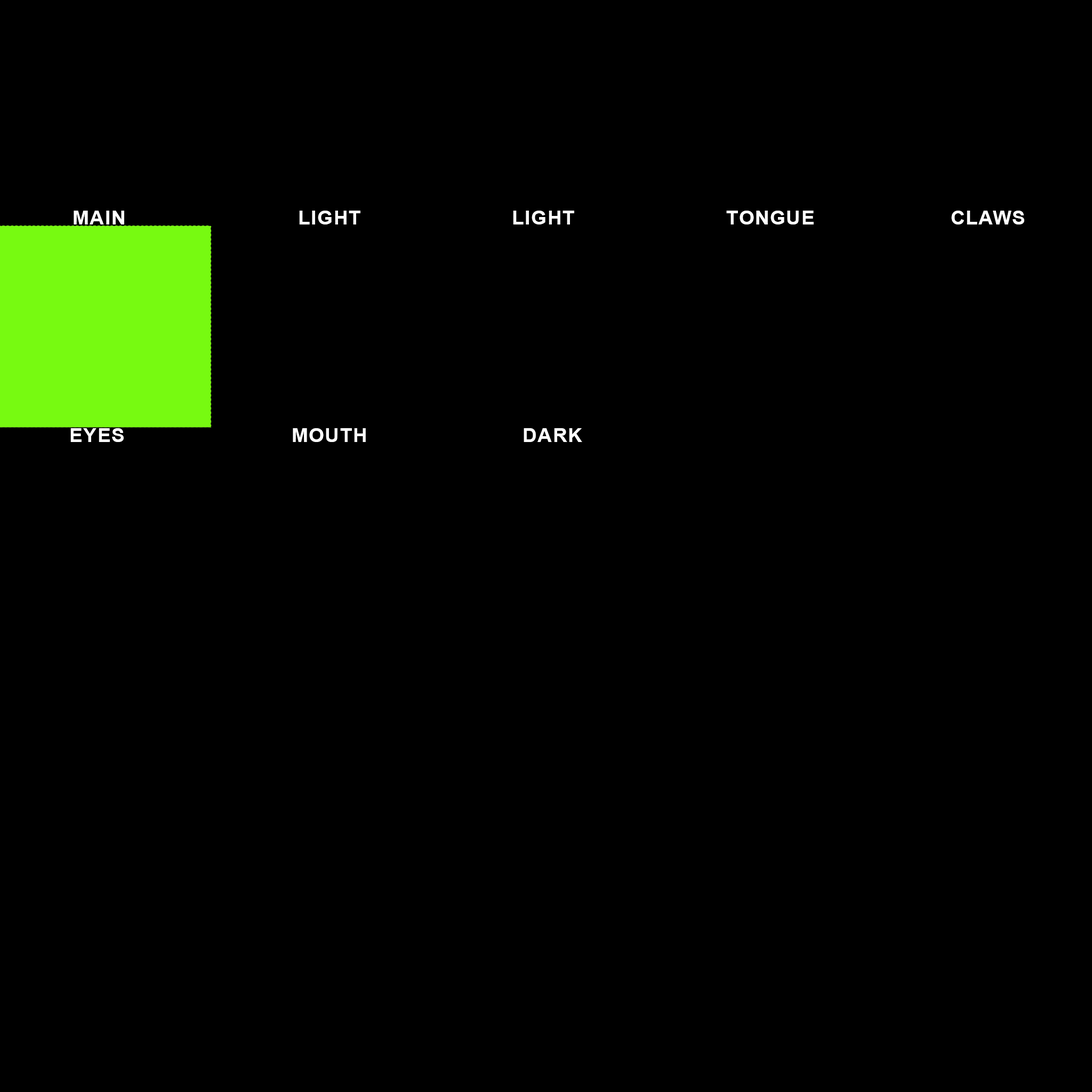
<style>
.page{position:relative;width:1092px;height:1092px;background:#000000}
.page>*{position:absolute;margin:0}
.t1{font:19.4px "Arial-BoldMT";letter-spacing:0.05em;color:#ffffff}
</style>
<div class="page">
<p class="t1" style="left:74px;top:211px;width:50px;height:13px">MAIN</p>
<p class="t1" style="left:299px;top:211px;width:61px;height:13px">LIGHT</p>
<p class="t1" style="left:513px;top:211px;width:61px;height:13px">LIGHT</p>
<p class="t1" style="left:726px;top:211px;width:88px;height:13px">TONGUE</p>
<p class="t1" style="left:951px;top:211px;width:73px;height:13px">CLAWS</p>
<p class="t1" style="left:70px;top:428px;width:54px;height:14px">EYES</p>
<p class="t1" style="left:293px;top:428px;width:73px;height:14px">MOUTH</p>
<p class="t1" style="left:524px;top:428px;width:58px;height:14px">DARK</p>
</div>
